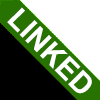
<style>
.page{position:relative;width:100px;height:100px;background:#ffffff}
.page>*{position:absolute;margin:0}
.t1{font:29px "Arial-BoldMT";color:#ffffff}
</style>
<div class="page">
<p class="t1" style="left:7px;top:7px;width:85px;height:87px;rotate:45deg">LINKED</p>
</div>
